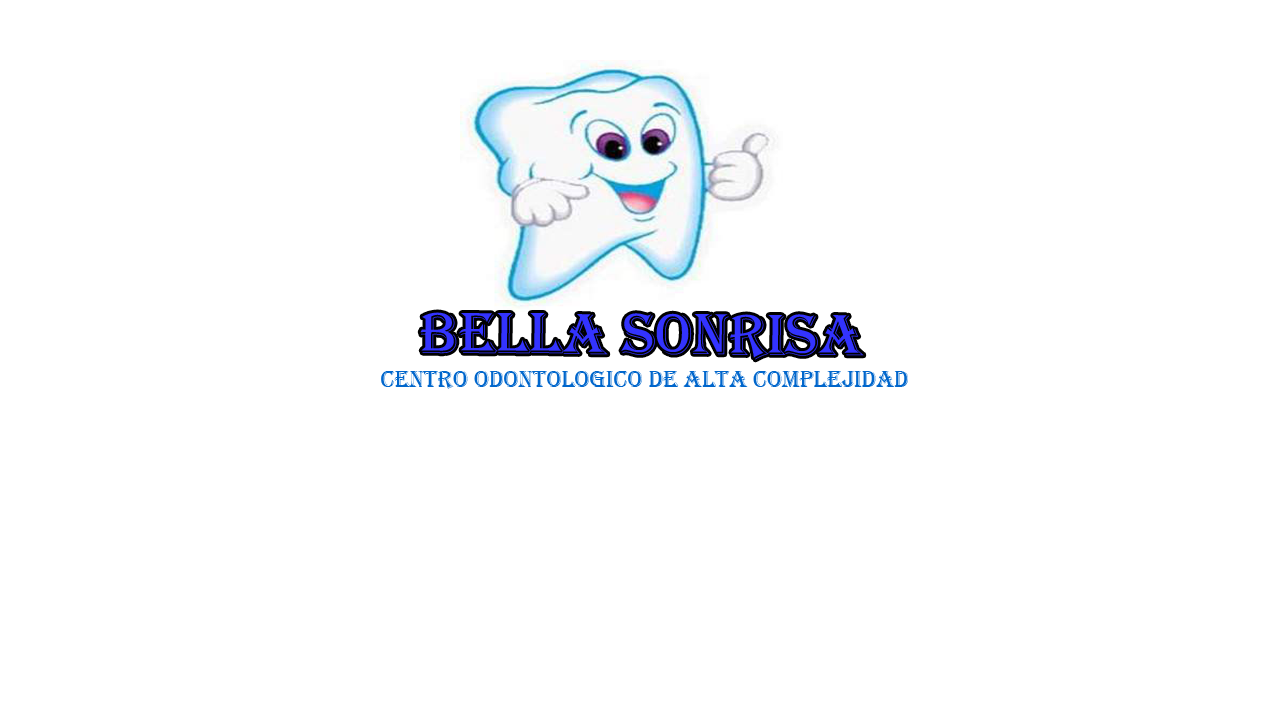
<style>
.page{position:relative;width:1280px;height:720px;background:#ffffff}
.page>*{position:absolute;margin:0}
.t1{font:60px "Algerian";color:#3333ff}
.t2{font:24px "Algerian";color:#0066cc}
</style>
<div class="page">
<p class="t1" style="left:420px;top:312px;width:444px;height:48px">BELLA SONRISA</p>
<p class="t2" style="left:381px;top:371px;width:527px;height:18px">CENTRO ODONTOLOGICO DE ALTA COMPLEJIDAD</p>
</div>
